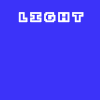
<style>
.page{position:relative;width:100px;height:100px;background:#3c33f9}
.page>*{position:absolute;margin:0}
.t1{font:11px "SmallHollows";letter-spacing:0.025em;color:#ffffff}
</style>
<div class="page">
<p class="t1" style="left:18px;top:12px;width:66px;height:11px">LIGHT</p>
</div>
